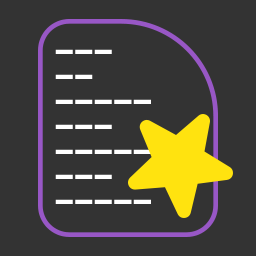
<style>
.page{position:relative;width:256px;height:256px;background:#333333}
.page>*{position:absolute;margin:0}
.t1{font:33.3px/25px "CascadiaMonoRoman-Bold";color:#ffffff}
</style>
<div class="page">
<p class="t1" style="left:55px;top:49px;width:96px;height:155px">---<br>--<br>-----<br>---<br>-----<br>---<br>-----</p>
</div>
